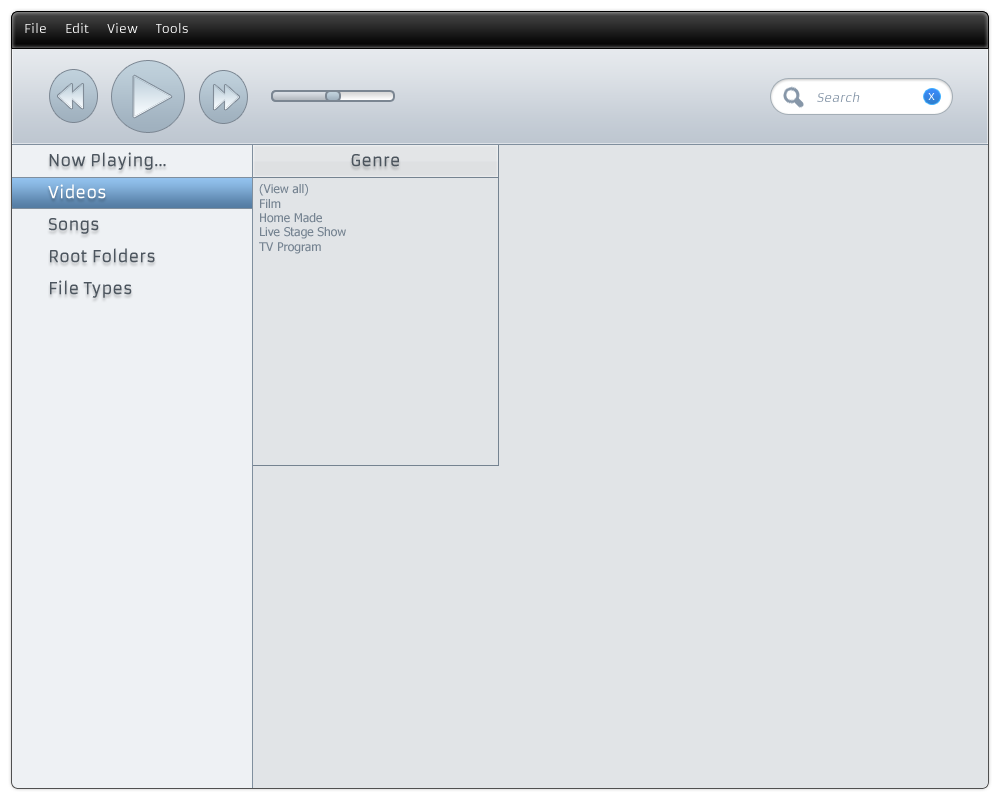
<style>
.page{position:relative;width:1000px;height:800px;background:#e1e4e7}
.page>*{position:absolute;margin:0}
.t1{font:12px "Armata-Regular";color:#ffffff}
.t2{font:12px "Armata-Regular";color:#8696a8;font-style:italic}
.t3{font:16px "Armata-Regular";color:#4c555e;font-weight:bold}
.t4{font:16px "Armata-Regular";color:#ffffff;font-weight:bold}
.t5{font:12px "Tahoma";color:#758391}
</style>
<div class="page">
<p class="t1" style="left:25px;top:23px;width:163px;height:10px">File      Edit      View      Tools</p>
<p class="t2" style="left:817px;top:92px;width:43px;height:10px">Search</p>
<p class="t1" style="left:928px;top:93px;width:7px;height:7px">x</p>
<p class="t3" style="left:49px;top:152px;width:117px;height:18px">Now Playing...</p>
<p class="t3" style="left:351px;top:154px;width:48px;height:13px">Genre</p>
<p class="t4" style="left:48px;top:184px;width:58px;height:15px">Videos</p>
<p class="t4" style="left:48px;top:184px;width:58px;height:15px">Videos</p>
<p class="t5" style="left:259px;top:184px;width:87px;height:70px">(View all)<br>Film<br>Home Made<br>Live Stage Show<br>TV Program</p>
<p class="t3" style="left:48px;top:218px;width:51px;height:16px">Songs</p>
<p class="t3" style="left:50px;top:248px;width:105px;height:15px">Root Folders</p>
<p class="t3" style="left:50px;top:280px;width:82px;height:18px">File Types</p>
</div>
